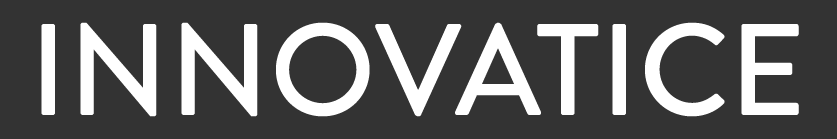
<style>
.page{position:relative;width:837px;height:139px;background:#333333}
.page>*{position:absolute;margin:0}
.t1{font:130px "BrandonGrotesque-Medium";color:#ffffff}
</style>
<div class="page">
<p class="t1" style="left:41px;top:22px;width:758px;height:95px">INNOVATICE</p>
</div>
